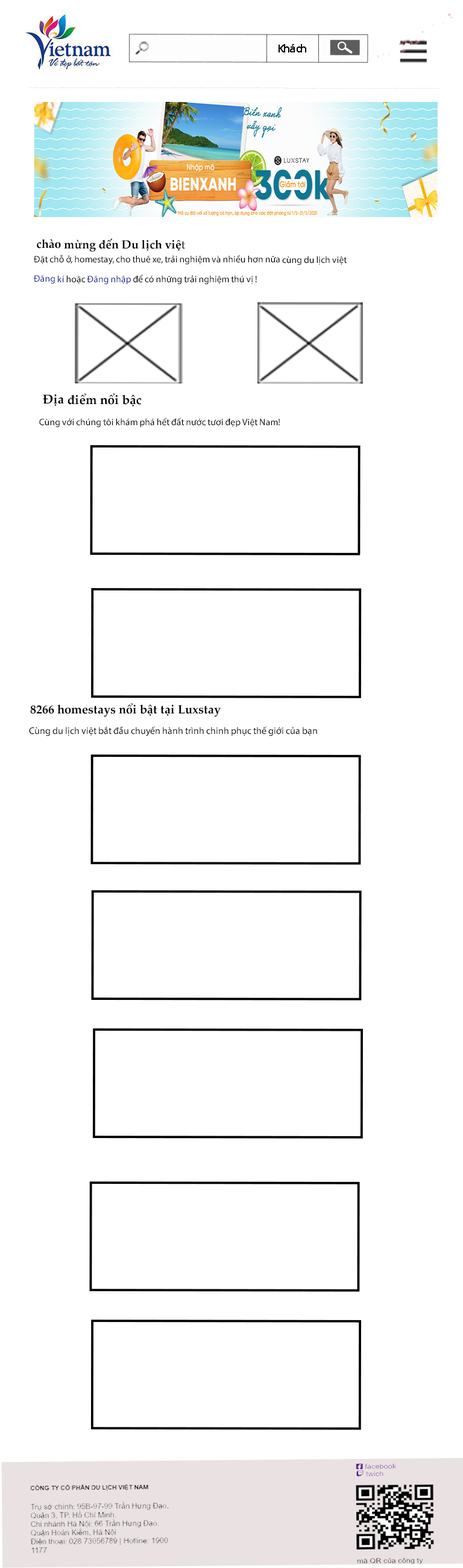
<style>
.page{position:relative;width:463px;height:1568px;background:#ffffff}
.page>*{position:absolute;margin:0}
.t1{font:10.7px "Tahoma";color:#000000}
.t2{font:11.7px "PalatinoLinotype-Bold";color:#000000}
.t3{font:11.7px "PalatinoLinotype-Roman";color:#000000}
.t4{font:9.4px "MyriadPro-Regular";color:#000000}
.t5{font:9.4px "MyriadPro-Regular";color:#23209b}
.t6{font:12.6px "PalatinoLinotype-Bold";color:#000000}
.t7{font:12.1px "PalatinoLinotype-Bold";color:#000000}
.t8{font:9.6px "MyriadPro-Regular";color:#000000}
</style>
<div class="page">
<p class="t1" style="left:279px;top:44px;width:27px;height:8px">Khách</p>
<p class="t2" style="left:37px;top:238px;width:148px;height:14px">chào mừng đến Du lịch việ<span class="t3">t</span></p>
<p class="t4" style="left:34px;top:255px;width:313px;height:10px">Đặt chỗ ở, homestay, cho thuê xe, trải nghiệm và nhiều hơn nữa cùng du lịch việt</p>
<p class="t4" style="left:34px;top:274px;width:223px;height:11px"><span class="t5">Đăng kí </span>hoặc <span class="t5">Đăng nhập </span>để có những trải nghiệm thú vị !</p>
<p class="t6" style="left:43px;top:393px;width:99px;height:13px">Địa điểm nổi bậc</p>
<p class="t4" style="left:39px;top:417px;width:241px;height:11px">Cùng với chúng tôi khám phá hết đất nước tươi đẹp Việt Nam!</p>
<p class="t7" style="left:30px;top:703px;width:191px;height:14px">8266 homestays nổi bật tại Luxstay</p>
<p class="t8" style="left:29px;top:726px;width:288px;height:10px">Cùng du lịch việt bắt đầu chuyến hành trình chinh phục thế giới của bạn</p>
</div>
